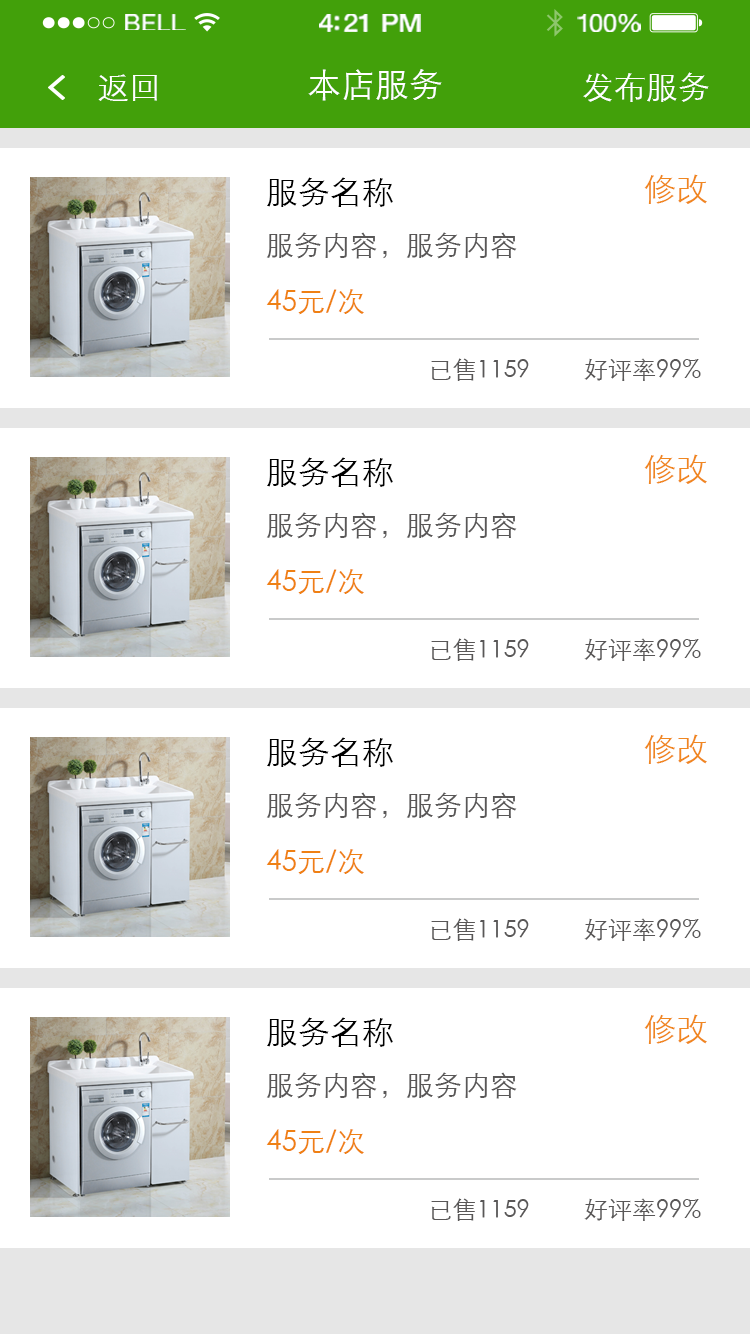
<style>
.page{position:relative;width:750px;height:1334px;background:#ffffff}
.page>*{position:absolute;margin:0}
.t1{font:23.3px "HelveticaNeue";letter-spacing:0.02em;color:#ffffff;scale:1.06 1}
.t2{font:25.3px "HelveticaNeue-Medium";letter-spacing:-0.02em;color:#ffffff;scale:1.06 1}
.t3{font:24.3px "HelveticaNeue";letter-spacing:-0.02em;color:#ffffff;scale:1.06 1}
.t4{font:32px "STXihei";color:#ffffff}
.t5{font:34px "STXihei";color:#ffffff}
.t6{font:32px "STXihei";color:#f08720}
.t7{font:28px/56px "STXihei";color:#595757}
.t8{font:32px/56px "STXihei";color:#000000}
.t9{font:28px/56px "STXihei";color:#ef8013}
.t10{font:24px "STXihei";color:#595757}
</style>
<div class="page">
<p class="t1" style="left:125px;top:14px;width:61px;height:16px">BELL</p>
<p class="t2" style="left:319px;top:14px;width:102px;height:18px">4:21 PM</p>
<p class="t3" style="left:577px;top:14px;width:64px;height:18px">100%</p>
<p class="t4" style="left:98px;top:74px;width:59px;height:27px">返回</p>
<p class="t5" style="left:308px;top:69px;width:134px;height:32px">本店服务</p>
<p class="t4" style="left:583px;top:72px;width:126px;height:30px">发布服务</p>
<p class="t6" style="left:644px;top:174px;width:63px;height:30px">修改</p>
<p class="t7" style="left:266px;top:177px;width:251px;height:138px"><span class="t8">服务名称<br></span>服务内容，服务内容<br><span class="t9">45元/次</span></p>
<p class="t10" style="left:431px;top:358px;width:270px;height:23px">已售1159         好评率99%</p>
<p class="t7" style="left:266px;top:457px;width:251px;height:138px"><span class="t8">服务名称<br></span>服务内容，服务内容<br><span class="t9">45元/次</span></p>
<p class="t6" style="left:644px;top:454px;width:63px;height:30px">修改</p>
<p class="t10" style="left:431px;top:638px;width:270px;height:23px">已售1159         好评率99%</p>
<p class="t7" style="left:266px;top:737px;width:251px;height:138px"><span class="t8">服务名称<br></span>服务内容，服务内容<br><span class="t9">45元/次</span></p>
<p class="t6" style="left:644px;top:734px;width:63px;height:30px">修改</p>
<p class="t10" style="left:431px;top:918px;width:270px;height:23px">已售1159         好评率99%</p>
<p class="t6" style="left:644px;top:1014px;width:63px;height:30px">修改</p>
<p class="t7" style="left:266px;top:1017px;width:251px;height:138px"><span class="t8">服务名称<br></span>服务内容，服务内容<br><span class="t9">45元/次</span></p>
<p class="t10" style="left:431px;top:1198px;width:270px;height:23px">已售1159         好评率99%</p>
</div>
